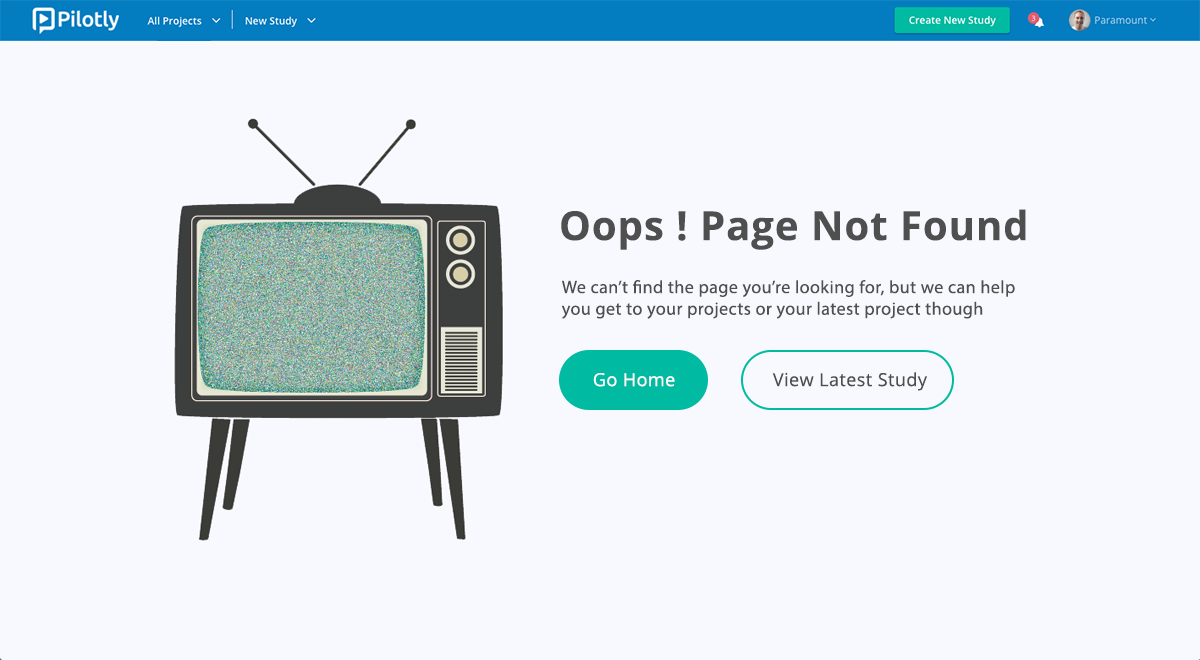
<style>
.page{position:relative;width:1200px;height:660px;background:#f8f8ff}
.page>*{position:absolute;margin:0}
.t1{font:40px "OpenSans-Bold";letter-spacing:0.025em;color:#4f4f4f}
.t2{font:18px "OpenSans";letter-spacing:0.025em;color:#4f4f4f}
.t3{font:18px "OpenSans";letter-spacing:0.025em;color:#ffffff}
</style>
<div class="page">
<p class="t1" style="left:561px;top:209px;width:465px;height:41px">Oops ! Page Not Found</p>
<p class="t2" style="left:561px;top:280px;width:454px;height:39px">We can’t find the page you’re looking for, but we can help<br>you get to your projects or your latest project though</p>
<p class="t3" style="left:593px;top:373px;width:82px;height:14px">Go Home</p>
<p class="t2" style="left:772px;top:372px;width:155px;height:19px">View Latest Study</p>
</div>
